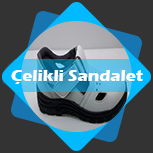
<style>
.page{position:relative;width:153px;height:153px;background:#333333}
.page>*{position:absolute;margin:0}
.t1{font:16.6px "ErasITC-Bold";color:#ffffff}
</style>
<div class="page">
<p class="t1" style="left:11px;top:70px;width:132px;height:14px">Çelikli Sandalet</p>
</div>
